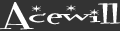
<style>
.page{position:relative;width:120px;height:31px;background:#333333}
.page>*{position:absolute;margin:0}
.t1{font:28.3px "FontdinerdotcomSparkly";color:#fefefe;scale:2.23 1}
</style>
<div class="page">
<p class="t1" style="left:0px;top:2px;width:120px;height:28px">Acewill</p>
</div>
